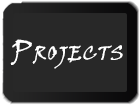
<style>
.page{position:relative;width:140px;height:105px;background:#282828}
.page>*{position:absolute;margin:0}
.t1{font:48px "VinerHandITC";letter-spacing:0.05em;color:#ffffff;font-variant:small-caps}
</style>
<div class="page">
<p class="t1" style="left:10px;top:39px;width:113px;height:30px">Projects</p>
</div>
